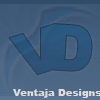
<style>
.page{position:relative;width:100px;height:100px}
.page>*{position:absolute;margin:0}
.t1{font:10px "Arial-Black";color:#dddddd}
</style>
<div class="page">
<p class="t1" style="left:13px;top:89px;width:89px;height:9px">Ventaja Designs</p>
</div>
